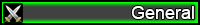
<style>
.page{position:relative;width:200px;height:25px;background:#414141}
.page>*{position:absolute;margin:0}
.t1{font:18px "ArialMT";color:#ffffff}
</style>
<div class="page">
<p class="t1" style="left:131px;top:6px;width:63px;height:13px">General</p>
</div>
